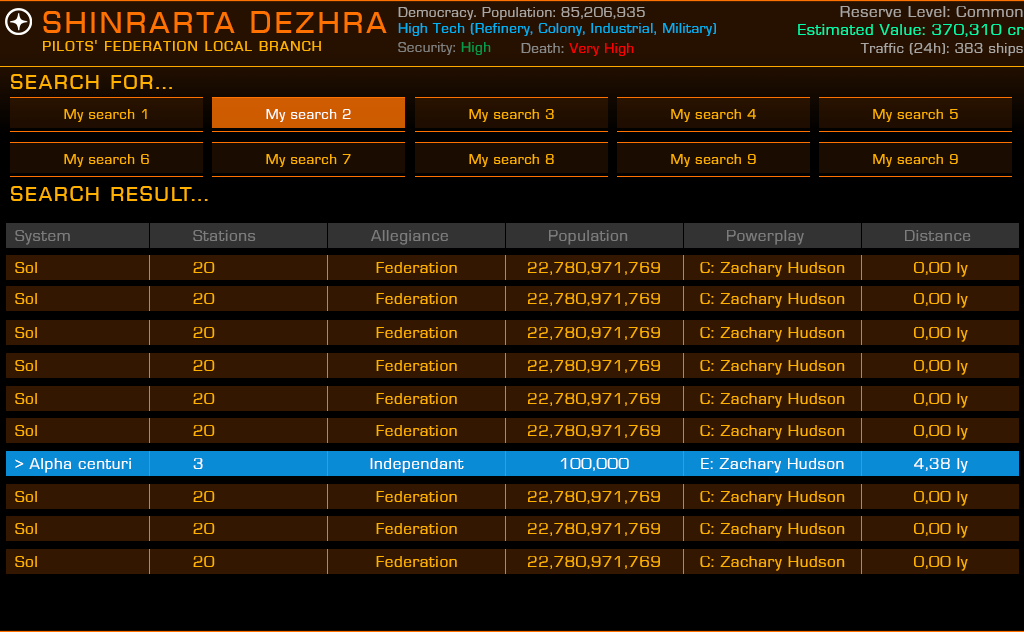
<style>
.page{position:relative;width:1024px;height:632px;background:#331700}
.page>*{position:absolute;margin:0}
.t1{font:16.7px "Eurostile-Roman";letter-spacing:0.05em;color:#aaa6a3}
.t2{font:37.5px "EuroCaps";letter-spacing:0.05em;color:#ff7100}
.t3{font:14.6px "Eurostile-Roman";letter-spacing:0.05em;color:#aaa6a3}
.t4{font:14.6px "Eurostile-Roman";letter-spacing:0.05em;color:#00b3f7}
.t5{font:16.7px "Eurostile-Roman";letter-spacing:0.05em;color:#00ffa8}
.t6{font:16.7px "EuroCaps";letter-spacing:0.05em;color:#ffb000}
.t7{font:14.6px "Eurostile-Roman";letter-spacing:0.05em;color:#808080}
.t8{font:14.6px "Eurostile-Roman";letter-spacing:0.05em;color:#029e4c}
.t9{font:14.6px "Eurostile-Roman";letter-spacing:0.05em;color:#fe0000}
.t10{font:14.6px "Eurostile-Roman";letter-spacing:0.05em;color:#8b8b8b}
.t11{font:25px "EuroCaps";letter-spacing:0.05em;color:#ffb000}
.t12{font:14.6px "Eurostile-Roman";letter-spacing:0.05em;color:#ffb000}
.t13{font:14.6px "Eurostile-Roman";letter-spacing:0.05em;color:#ffffff}
.t14{font:16.7px "Eurostile-Roman";letter-spacing:0.05em;color:#7c7c7c}
.t15{font:16.7px "Eurostile-Roman";letter-spacing:0.05em;color:#ffb000}
.t16{font:16.7px "Eurostile-Roman";letter-spacing:0.05em;color:#ffffff}
</style>
<div class="page">
<p class="t1" style="left:840px;top:6px;width:183px;height:11px">Reserve Level: Common</p>
<p class="t2" style="left:43px;top:11px;width:344px;height:22px">Shinrarta Dezhra</p>
<p class="t3" style="left:398px;top:7px;width:247px;height:13px">Democracy. Population: 85,206,935</p>
<p class="t4" style="left:398px;top:23px;width:318px;height:13px">High Tech (Refinery, Colony, Industrial, Military)</p>
<p class="t5" style="left:798px;top:24px;width:226px;height:13px">Estimated Value: 370,310 cr</p>
<p class="t6" style="left:43px;top:40px;width:278px;height:11px">pilots' federation local branch</p>
<p class="t7" style="left:398px;top:42px;width:93px;height:13px">Security: <span class="t8">High</span></p>
<p class="t9" style="left:521px;top:43px;width:113px;height:13px"><span class="t10">Death: </span>Very High</p>
<p class="t3" style="left:860px;top:43px;width:163px;height:13px">Traffic (24h): 383 ships</p>
<p class="t11" style="left:11px;top:74px;width:161px;height:15px">Search for...</p>
<p class="t12" style="left:64px;top:109px;width:83px;height:13px">My search 1</p>
<p class="t13" style="left:266px;top:109px;width:85px;height:13px">My search 2</p>
<p class="t12" style="left:469px;top:109px;width:85px;height:13px">My search 3</p>
<p class="t12" style="left:671px;top:109px;width:85px;height:13px">My search 4</p>
<p class="t12" style="left:873px;top:109px;width:85px;height:13px">My search 5</p>
<p class="t12" style="left:64px;top:154px;width:85px;height:13px">My search 6</p>
<p class="t12" style="left:266px;top:154px;width:85px;height:13px">My search 7</p>
<p class="t12" style="left:469px;top:154px;width:85px;height:13px">My search 8</p>
<p class="t12" style="left:671px;top:154px;width:85px;height:13px">My search 9</p>
<p class="t12" style="left:873px;top:154px;width:85px;height:13px">My search 9</p>
<p class="t11" style="left:11px;top:186px;width:197px;height:15px">SEARCH RESULT...</p>
<p class="t14" style="left:15px;top:230px;width:55px;height:15px">System</p>
<p class="t14" style="left:193px;top:230px;width:63px;height:11px">Stations</p>
<p class="t14" style="left:371px;top:230px;width:77px;height:15px">Allegiance</p>
<p class="t14" style="left:549px;top:230px;width:79px;height:15px">Population</p>
<p class="t14" style="left:727px;top:230px;width:77px;height:15px">Powerplay</p>
<p class="t14" style="left:905px;top:230px;width:66px;height:11px">Distance</p>
<p class="t15" style="left:15px;top:262px;width:22px;height:11px">Sol</p>
<p class="t15" style="left:193px;top:262px;width:22px;height:11px">20</p>
<p class="t15" style="left:376px;top:262px;width:81px;height:11px">Federation</p>
<p class="t15" style="left:528px;top:262px;width:132px;height:13px">22,780,971,769</p>
<p class="t15" style="left:700px;top:262px;width:145px;height:15px">C: Zachary Hudson</p>
<p class="t15" style="left:914px;top:262px;width:54px;height:15px">0,00 ly</p>
<p class="t15" style="left:15px;top:293px;width:22px;height:11px">Sol</p>
<p class="t15" style="left:193px;top:293px;width:22px;height:11px">20</p>
<p class="t15" style="left:376px;top:293px;width:81px;height:11px">Federation</p>
<p class="t15" style="left:528px;top:293px;width:132px;height:13px">22,780,971,769</p>
<p class="t15" style="left:700px;top:293px;width:145px;height:15px">C: Zachary Hudson</p>
<p class="t15" style="left:914px;top:293px;width:54px;height:15px">0,00 ly</p>
<p class="t15" style="left:15px;top:327px;width:22px;height:11px">Sol</p>
<p class="t15" style="left:193px;top:327px;width:22px;height:11px">20</p>
<p class="t15" style="left:376px;top:327px;width:81px;height:11px">Federation</p>
<p class="t15" style="left:528px;top:327px;width:132px;height:13px">22,780,971,769</p>
<p class="t15" style="left:700px;top:327px;width:145px;height:15px">C: Zachary Hudson</p>
<p class="t15" style="left:914px;top:327px;width:54px;height:15px">0,00 ly</p>
<p class="t15" style="left:15px;top:360px;width:22px;height:11px">Sol</p>
<p class="t15" style="left:193px;top:360px;width:22px;height:11px">20</p>
<p class="t15" style="left:376px;top:360px;width:81px;height:11px">Federation</p>
<p class="t15" style="left:528px;top:360px;width:132px;height:13px">22,780,971,769</p>
<p class="t15" style="left:700px;top:360px;width:145px;height:15px">C: Zachary Hudson</p>
<p class="t15" style="left:914px;top:360px;width:54px;height:15px">0,00 ly</p>
<p class="t15" style="left:15px;top:393px;width:22px;height:11px">Sol</p>
<p class="t15" style="left:193px;top:393px;width:22px;height:11px">20</p>
<p class="t15" style="left:376px;top:393px;width:81px;height:11px">Federation</p>
<p class="t15" style="left:528px;top:393px;width:132px;height:13px">22,780,971,769</p>
<p class="t15" style="left:700px;top:393px;width:145px;height:15px">C: Zachary Hudson</p>
<p class="t15" style="left:914px;top:393px;width:54px;height:15px">0,00 ly</p>
<p class="t15" style="left:15px;top:425px;width:22px;height:11px">Sol</p>
<p class="t15" style="left:193px;top:425px;width:22px;height:11px">20</p>
<p class="t15" style="left:376px;top:425px;width:81px;height:11px">Federation</p>
<p class="t15" style="left:528px;top:425px;width:132px;height:13px">22,780,971,769</p>
<p class="t15" style="left:700px;top:425px;width:145px;height:15px">C: Zachary Hudson</p>
<p class="t15" style="left:914px;top:425px;width:54px;height:15px">0,00 ly</p>
<p class="t16" style="left:15px;top:458px;width:116px;height:15px">&gt; Alpha centuri</p>
<p class="t16" style="left:193px;top:458px;width:10px;height:11px">3</p>
<p class="t16" style="left:370px;top:458px;width:94px;height:15px">Independant</p>
<p class="t16" style="left:560px;top:458px;width:69px;height:13px">100,000</p>
<p class="t16" style="left:701px;top:458px;width:143px;height:15px">E: Zachary Hudson</p>
<p class="t16" style="left:914px;top:458px;width:54px;height:15px">4,38 ly</p>
<p class="t15" style="left:15px;top:491px;width:22px;height:11px">Sol</p>
<p class="t15" style="left:193px;top:491px;width:22px;height:11px">20</p>
<p class="t15" style="left:376px;top:491px;width:81px;height:11px">Federation</p>
<p class="t15" style="left:528px;top:491px;width:132px;height:13px">22,780,971,769</p>
<p class="t15" style="left:700px;top:491px;width:145px;height:15px">C: Zachary Hudson</p>
<p class="t15" style="left:914px;top:491px;width:54px;height:15px">0,00 ly</p>
<p class="t15" style="left:15px;top:523px;width:22px;height:11px">Sol</p>
<p class="t15" style="left:193px;top:523px;width:22px;height:11px">20</p>
<p class="t15" style="left:376px;top:523px;width:81px;height:11px">Federation</p>
<p class="t15" style="left:528px;top:523px;width:132px;height:13px">22,780,971,769</p>
<p class="t15" style="left:700px;top:523px;width:145px;height:15px">C: Zachary Hudson</p>
<p class="t15" style="left:914px;top:523px;width:54px;height:15px">0,00 ly</p>
<p class="t15" style="left:15px;top:556px;width:22px;height:11px">Sol</p>
<p class="t15" style="left:193px;top:556px;width:22px;height:11px">20</p>
<p class="t15" style="left:376px;top:556px;width:81px;height:11px">Federation</p>
<p class="t15" style="left:528px;top:556px;width:132px;height:13px">22,780,971,769</p>
<p class="t15" style="left:700px;top:556px;width:145px;height:15px">C: Zachary Hudson</p>
<p class="t15" style="left:914px;top:556px;width:54px;height:15px">0,00 ly</p>
</div>
